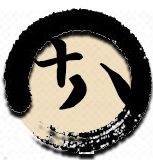
<style>
.page{position:relative;width:153px;height:160px;background:#000000}
.page>*{position:absolute;margin:0}
.t1{font:70.6px "SCFwxz";color:#000000;font-weight:bold;scale:0.97 1}
.t2{font:90px "SCFwxz";color:#000000;font-weight:bold}
</style>
<div class="page">
<p class="t1" style="left:33px;top:35px;width:50px;height:53px">十</p>
<p class="t2" style="left:59px;top:63px;width:73px;height:47px">八</p>
</div>
